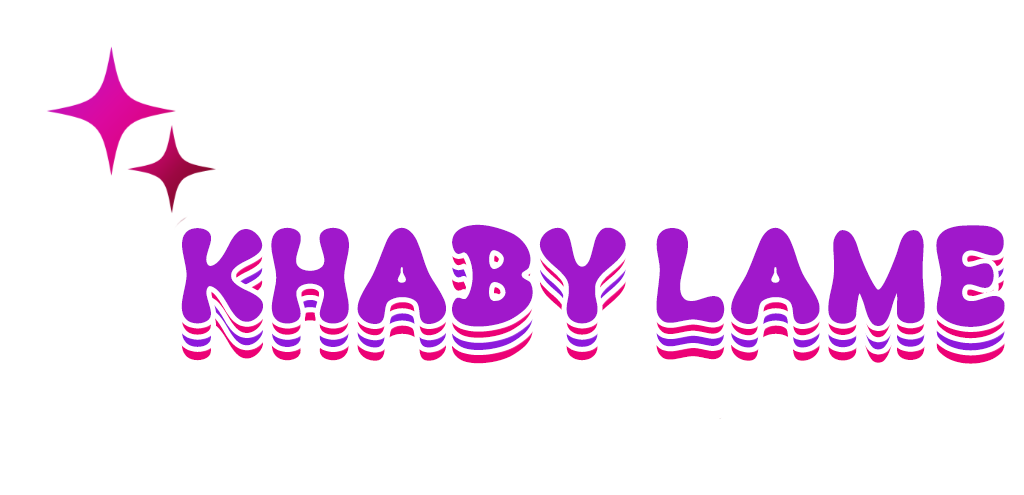
<style>
.page{position:relative;width:1024px;height:495px;background:#ffffff}
.page>*{position:absolute;margin:0}
.t1{font:116.8px "Kush-Fat";letter-spacing:0.03em;color:#a018cb;text-transform:uppercase}
.t2{font:116.8px "Kush-Fat";letter-spacing:0.03em;color:#8d19dc;text-transform:uppercase}
.t3{font:116.8px "Kush-Fat";letter-spacing:0.03em;text-transform:uppercase}
</style>
<div class="page">
<p class="t1" style="left:181px;top:228px;width:824px;height:102px">KHABY LAME</p>
<p class="t1" style="left:181px;top:224px;width:824px;height:103px">KHABY LAME</p>
<p class="t2" style="left:181px;top:246px;width:824px;height:103px">KHABY LAME</p>
<p class="t1" style="left:181px;top:236px;width:824px;height:103px">KHABY LAME</p>
<p class="t2" style="left:181px;top:248px;width:824px;height:103px">KHABY LAME</p>
<p class="t3" style="left:181px;top:261px;width:824px;height:103px">KHABY LAME</p>
</div>
